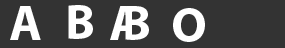
<style>
.page{position:relative;width:285px;height:48px;background:#333333}
.page>*{position:absolute;margin:0}
.t1{font:50px "MyriadPro-Bold";letter-spacing:-0.005em;color:#ffffff}
</style>
<div class="page">
<p class="t1" style="left:10px;top:6px;width:31px;height:34px">A</p>
<p class="t1" style="left:68px;top:5px;width:25px;height:34px">B</p>
<p class="t1" style="left:173px;top:8px;width:32px;height:34px">O</p>
</div>
